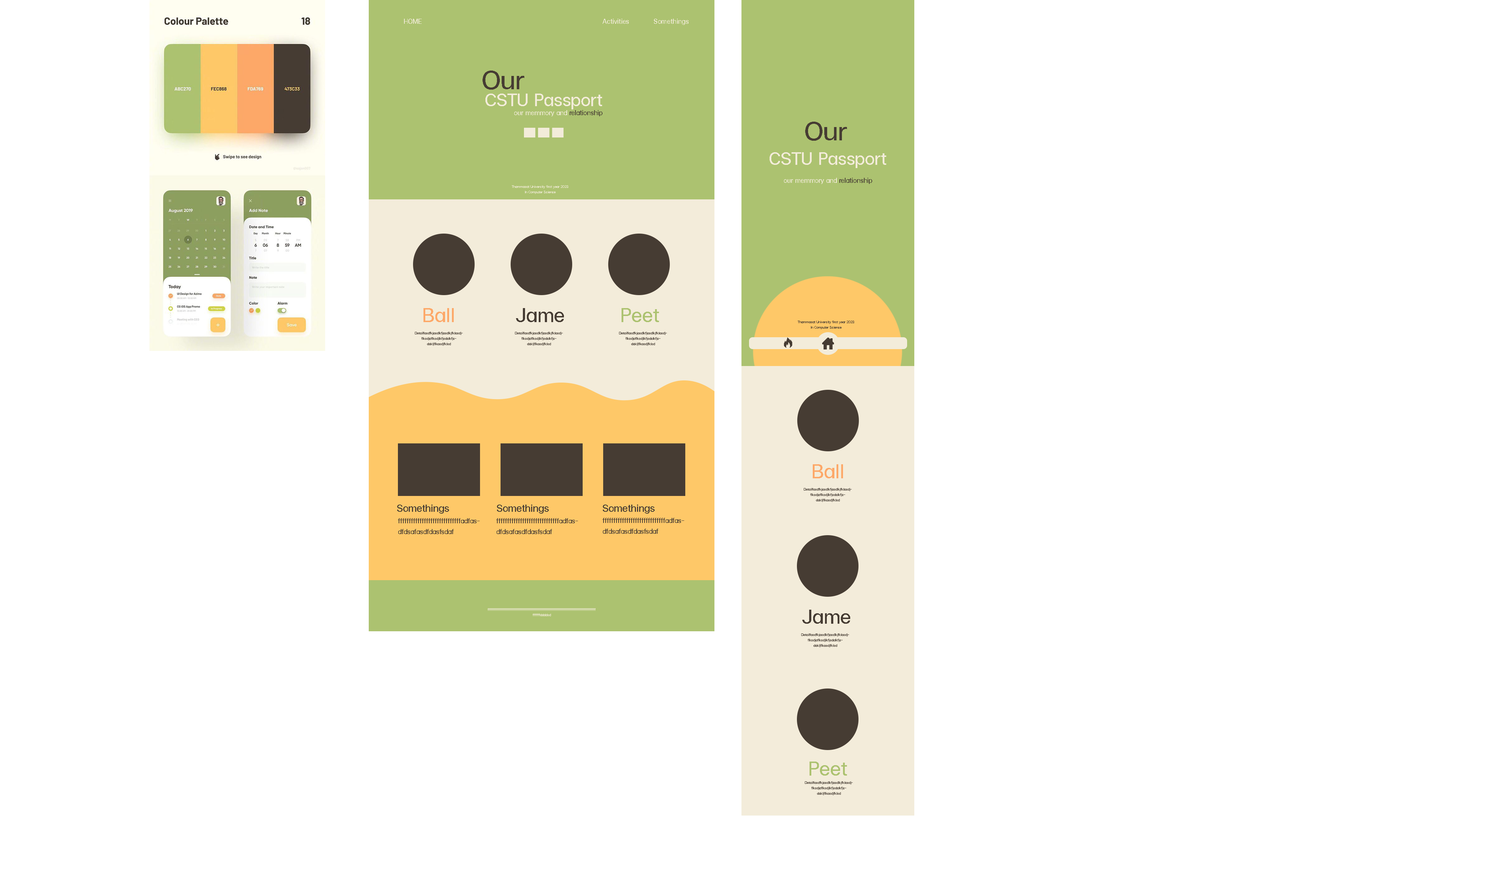
<style>
.page{position:relative;width:1502px;height:894px;background:#ffffff}
.page>*{position:absolute;margin:0}
.t1{font:9px "FCMinimalRegular";color:#f3ecda}
.t2{font:36px "FCMinimalRegular";color:#463c33}
.t3{font:24px "FCMinimalRegular";color:#f3ecda}
.t4{font:4.5px "FCMinimalRegular";color:#f3ecda}
.t5{font:27px "FCMinimalRegular";color:#fda868}
.t6{font:27px "FCMinimalRegular";color:#463c33}
.t7{font:27px "FCMinimalRegular";color:#acc270}
.t8{font:4.5px "FCMinimalRegular";color:#463c33}
.t9{font:13.5px "FCMinimalRegular";color:#463c33}
.t10{font:9px "FCMinimalRegular";color:#463c33}
</style>
<div class="page">
<p class="t1" style="left:404px;top:19px;width:18px;height:5px">HOME</p>
<p class="t1" style="left:602px;top:19px;width:27px;height:5px">Activities</p>
<p class="t1" style="left:654px;top:19px;width:34px;height:6px">Somethings</p>
<p class="t2" style="left:482px;top:71px;width:42px;height:19px">Our</p>
<p class="t3" style="left:485px;top:94px;width:117px;height:15px">CSTU Passport</p>
<p class="t2" style="left:805px;top:122px;width:42px;height:19px">Our</p>
<p class="t3" style="left:769px;top:152px;width:117px;height:16px">CSTU Passport</p>
<p class="t4" style="left:512px;top:185px;width:56px;height:9px;text-align:center">Thammasat University first year 2023<br>In Computer Science</p>
<p class="t5" style="left:423px;top:308px;width:31px;height:14px">Ball</p>
<p class="t6" style="left:516px;top:308px;width:48px;height:14px">Jame</p>
<p class="t7" style="left:621px;top:308px;width:38px;height:14px">Peet</p>
<p class="t8" style="left:797px;top:321px;width:57px;height:8px;text-align:center">Thammasat University first year 2023<br>In Computer Science</p>
<p class="t8" style="left:415px;top:332px;width:48px;height:14px;text-align:center">Detailfasdfkjasdlkfjasdlkjfklasdjflksdjaflksdjlkfjsdalkfjsdakljflkasdjfklsd</p>
<p class="t8" style="left:515px;top:332px;width:48px;height:14px;text-align:center">Detailfasdfkjasdlkfjasdlkjfklasdjflksdjaflksdjlkfjsdalkfjsdakljflkasdjfklsd</p>
<p class="t8" style="left:619px;top:332px;width:48px;height:14px;text-align:center">Detailfasdfkjasdlkfjasdlkjfklasdjflksdjaflksdjlkfjsdalkfjsdakljflkasdjfklsd</p>
<p class="t5" style="left:813px;top:464px;width:30px;height:14px">Ball</p>
<p class="t8" style="left:804px;top:488px;width:47px;height:14px;text-align:center">Detailfasdfkjasdlkfjasdlkjfklasdjflksdjaflksdjlkfjsdalkfjsdakljflkasdjfklsd</p>
<p class="t9" style="left:397px;top:505px;width:52px;height:9px">Somethings</p>
<p class="t9" style="left:497px;top:505px;width:52px;height:9px">Somethings</p>
<p class="t9" style="left:603px;top:505px;width:51px;height:9px">Somethings</p>
<p class="t10" style="left:398px;top:518px;width:82px;height:16px">fffffffffffffffffffffffffffffadfasdfdsafasdfdasfsdaf</p>
<p class="t10" style="left:496px;top:518px;width:82px;height:16px">fffffffffffffffffffffffffffffadfasdfdsafasdfdasfsdaf</p>
<p class="t10" style="left:602px;top:518px;width:82px;height:16px">fffffffffffffffffffffffffffffadfasdfdsafasdfdasfsdaf</p>
<p class="t4" style="left:487px;top:608px;width:108px;height:8px;text-align:center">fffffffffffffffffffffffffffffffffffffffffffffffffffffffffffffffffffffffffffffffffffffffffffffffffffffffffffddddsd</p>
<p class="t6" style="left:802px;top:610px;width:48px;height:14px">Jame</p>
<p class="t8" style="left:801px;top:634px;width:48px;height:14px;text-align:center">Detailfasdfkjasdlkfjasdlkjfklasdjflksdjaflksdjlkfjsdalkfjsdakljflkasdjfklsd</p>
<p class="t7" style="left:809px;top:762px;width:38px;height:14px">Peet</p>
<p class="t8" style="left:805px;top:782px;width:47px;height:14px;text-align:center">Detailfasdfkjasdlkfjasdlkjfklasdjflksdjaflksdjlkfjsdalkfjsdakljflkasdjfklsd</p>
</div>
